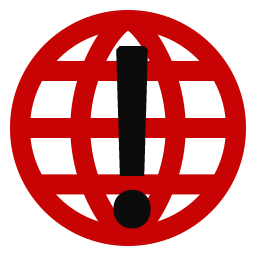
<style>
.page{position:relative;width:256px;height:256px;background:#ffffff}
.page>*{position:absolute;margin:0}
.t1{font:256px "MyriadPro-Regular";color:#0c0c0c;font-weight:bold}
</style>
<div class="page">
<p class="t1" style="left:113px;top:46px;width:38px;height:183px">!</p>
</div>
